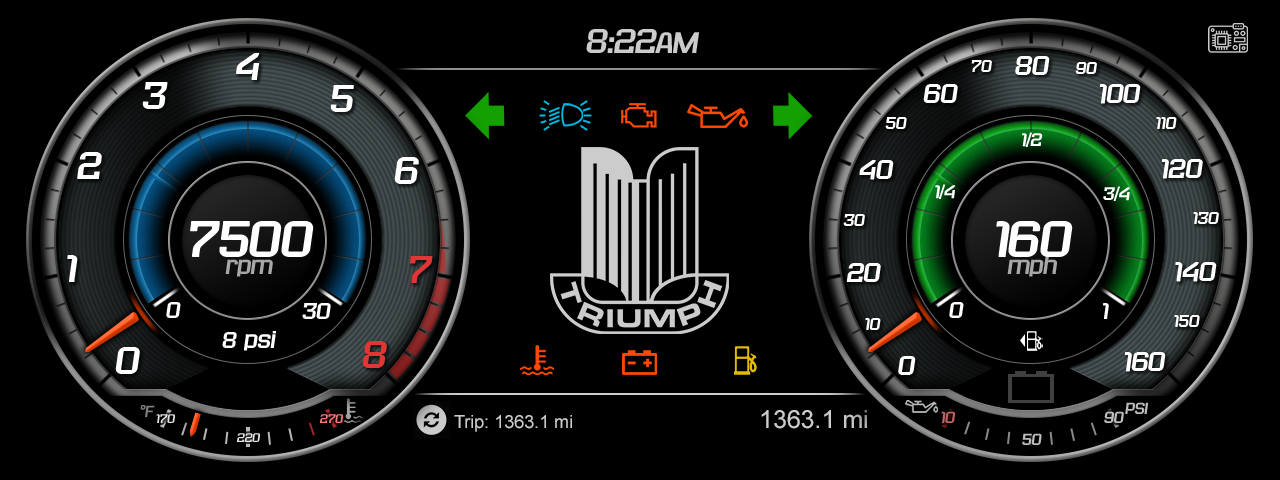
<style>
.page{position:relative;width:1280px;height:480px;background:#000000}
.page>*{position:absolute;margin:0}
.t1{font:30px "BladiTwo4FItalic";color:#cccccc}
.t2{font:26px "BladiTwo4FItalic";color:#cccccc}
.t3{font:33.6px "BladiTwo4FItalic";color:#ffffff}
.t4{font:15px "BladiTwo4FItalic";color:#ffffff}
.t5{font:24px "BladiTwo4FItalic";color:#ffffff}
.t6{font:16px "BladiTwo4FItalic";color:#ffffff}
.t7{font:45px "BladiTwo4FItalic";color:#ffffff}
.t8{font:33.6px "BladiTwo4FItalic";color:#e03636}
.t9{font:20.7px "BladiTwo4FItalic";color:#a8a8a8}
.t10{font:20px "BladiTwo4FItalic";color:#ffffff}
.t11{font:14px "BladiTwo4FItalic";color:#7d7d7d}
.t12{font:11px "BladiTwo4FItalic";color:#e3e3e3}
.t13{font:11px "BladiTwo4FItalic";color:#ff7a7a}
.t14{font:25px "ArialMT";color:#cccccc}
.t15{font:14px "BladiTwo4FItalic";color:#bd6464}
.t16{font:14px "BladiTwo4FItalic";color:#bdbdbd}
.t17{font:18px "ArialMT";color:#cccccc}
.t18{font:11px "BladiTwo4FItalic";color:#e4e4e4}
</style>
<div class="page">
<p class="t1" style="left:586px;top:29px;width:114px;height:24px">8:22<span class="t2">AM</span></p>
<p class="t3" style="left:236px;top:53px;width:24px;height:27px">4</p>
<p class="t4" style="left:971px;top:60px;width:21px;height:12px">70</p>
<p class="t5" style="left:1015px;top:56px;width:35px;height:19px">80</p>
<p class="t4" style="left:1075px;top:62px;width:22px;height:12px">90</p>
<p class="t3" style="left:142px;top:82px;width:26px;height:27px">3</p>
<p class="t3" style="left:330px;top:85px;width:24px;height:27px">5</p>
<p class="t5" style="left:923px;top:84px;width:35px;height:19px">60</p>
<p class="t5" style="left:1099px;top:84px;width:42px;height:20px">100</p>
<p class="t4" style="left:885px;top:117px;width:22px;height:12px">50</p>
<p class="t4" style="left:1156px;top:117px;width:21px;height:12px">110</p>
<p class="t6" style="left:1022px;top:132px;width:21px;height:15px">1/2</p>
<p class="t3" style="left:77px;top:152px;width:25px;height:27px">2</p>
<p class="t3" style="left:394px;top:157px;width:25px;height:27px">6</p>
<p class="t5" style="left:859px;top:160px;width:35px;height:20px">40</p>
<p class="t5" style="left:1161px;top:159px;width:42px;height:20px">120</p>
<p class="t6" style="left:935px;top:184px;width:20px;height:15px">1/4</p>
<p class="t6" style="left:1103px;top:186px;width:27px;height:15px">3/4</p>
<p class="t7" style="left:190px;top:221px;width:124px;height:36px">7500</p>
<p class="t4" style="left:843px;top:214px;width:22px;height:12px">30</p>
<p class="t7" style="left:996px;top:221px;width:77px;height:36px">160</p>
<p class="t4" style="left:1193px;top:212px;width:26px;height:12px">130</p>
<p class="t3" style="left:67px;top:255px;width:11px;height:27px">1</p>
<p class="t8" style="left:409px;top:256px;width:24px;height:27px">7</p>
<p class="t9" style="left:1007px;top:256px;width:50px;height:21px">mph</p>
<p class="t9" style="left:225px;top:259px;width:48px;height:18px">rpm</p>
<p class="t5" style="left:846px;top:263px;width:35px;height:19px">20</p>
<p class="t5" style="left:1175px;top:262px;width:42px;height:20px">140</p>
<p class="t10" style="left:166px;top:302px;width:15px;height:16px">0</p>
<p class="t10" style="left:302px;top:303px;width:29px;height:16px">30</p>
<p class="t10" style="left:949px;top:302px;width:15px;height:16px">0</p>
<p class="t10" style="left:1103px;top:303px;width:6px;height:16px">1</p>
<p class="t4" style="left:865px;top:318px;width:16px;height:12px">10</p>
<p class="t4" style="left:1174px;top:315px;width:26px;height:12px">150</p>
<p class="t10" style="left:222px;top:331px;width:54px;height:20px">8 psi</p>
<p class="t8" style="left:362px;top:341px;width:25px;height:27px">8</p>
<p class="t3" style="left:115px;top:347px;width:25px;height:27px">0</p>
<p class="t5" style="left:1124px;top:352px;width:42px;height:20px">160</p>
<p class="t5" style="left:898px;top:356px;width:18px;height:19px">0</p>
<p class="t11" style="left:140px;top:405px;width:15px;height:12px">°F</p>
<p class="t12" style="left:156px;top:414px;width:19px;height:9px">170</p>
<p class="t13" style="left:320px;top:414px;width:23px;height:9px">270</p>
<p class="t14" style="left:761px;top:410px;width:106px;height:19px">1363.1 mi</p>
<p class="t15" style="left:941px;top:411px;width:15px;height:12px">10</p>
<p class="t16" style="left:1104px;top:411px;width:20px;height:12px">90</p>
<p class="t16" style="left:1125px;top:402px;width:23px;height:12px">PSI</p>
<p class="t17" style="left:454px;top:415px;width:118px;height:17px">Trip: 1363.1 mi</p>
<p class="t18" style="left:237px;top:433px;width:23px;height:9px">220</p>
<p class="t16" style="left:1022px;top:433px;width:20px;height:12px">50</p>
</div>
